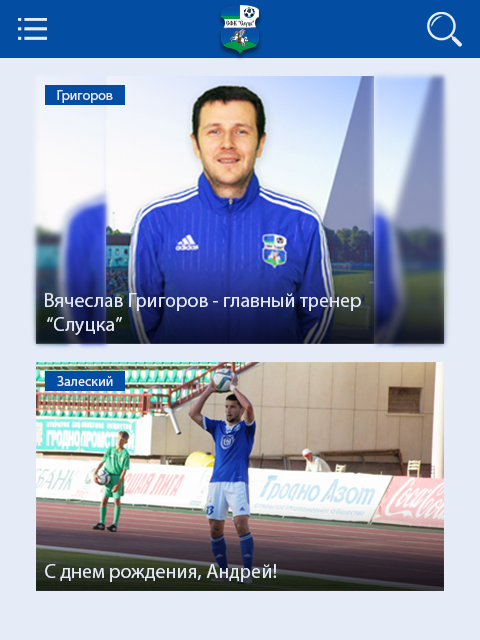
<style>
.page{position:relative;width:480px;height:640px;background:#e6ecf7}
.page>*{position:absolute;margin:0}
.t1{font:14px "MyriadPro-Regular";color:#e6ecf7}
.t2{font:20px "MyriadPro-Regular";color:#e6ecf7}
</style>
<div class="page">
<p class="t1" style="left:57px;top:90px;width:56px;height:13px">Григоров</p>
<p class="t2" style="left:45px;top:293px;width:316px;height:42px">Вячеслав Григоров - главный тренер<br> “Слуцка”</p>
<p class="t1" style="left:57px;top:376px;width:56px;height:10px">Залеский</p>
<p class="t2" style="left:45px;top:564px;width:231px;height:18px">С днем рождения, Андрей!</p>
</div>
